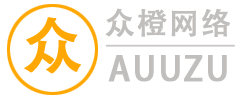
<style>
.page{position:relative;width:240px;height:100px;background:#ffffff}
.page>*{position:absolute;margin:0}
.t1{font:60px "AdobeHeitiStd-Regular";letter-spacing:0.04em;color:#ffa803;text-transform:uppercase;font-weight:bold}
.t2{font:30px "AdobeHeitiStd-Regular";letter-spacing:0.04em;color:#c0bfbd;text-transform:uppercase;font-weight:bold}
.t3{font:33.3px "AdobeHeitiStd-Regular";letter-spacing:0.04em;color:#c0bfbd;text-transform:uppercase;font-weight:bold}
</style>
<div class="page">
<p class="t1" style="left:24px;top:17px;width:57px;height:57px">众</p>
<p class="t2" style="left:105px;top:8px;width:126px;height:29px">众橙网络</p>
<p class="t3" style="left:108px;top:55px;width:119px;height:27px">AUUZU</p>
</div>
